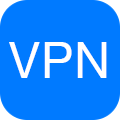
<style>
.page{position:relative;width:120px;height:120px;background:#007aff}
.page>*{position:absolute;margin:0}
.t1{font:50px "HelveticaNeue";letter-spacing:0.013em;color:#ffffff}
</style>
<div class="page">
<p class="t1" style="left:9px;top:42px;width:98px;height:36px">VPN</p>
</div>
